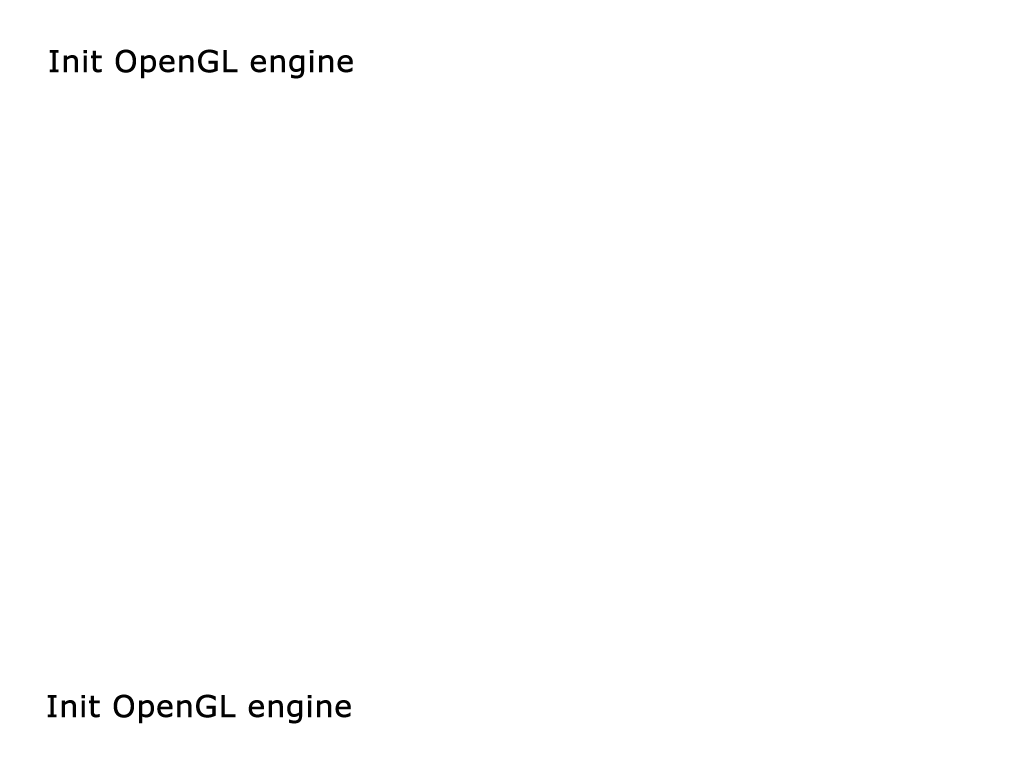
<style>
.page{position:relative;width:1024px;height:768px;background:#ffffff}
.page>*{position:absolute;margin:0}
.t1{font:30px "Verdana";color:#010101;font-weight:bold}
</style>
<div class="page">
<p class="t1" style="left:49px;top:49px;width:304px;height:30px">Init OpenGL engine</p>
<p class="t1" style="left:47px;top:694px;width:304px;height:30px">Init OpenGL engine</p>
</div>
